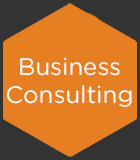
<style>
.page{position:relative;width:140px;height:160px;background:#e67e22}
.page>*{position:absolute;margin:0}
.t1{font:24px "GothamRounded-Book";color:#ffffff}
</style>
<div class="page">
<p class="t1" style="left:7px;top:57px;width:125px;height:50px;text-align:center">Business<br>Consulting</p>
</div>
